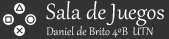
<style>
.page{position:relative;width:169px;height:39px;background:#333333}
.page>*{position:absolute;margin:0}
.t1{font:13.6px "Gabriola";color:#ffffff}
.t2{font:27.1px "Gabriola";color:#ffffff}
</style>
<div class="page">
<p class="t1" style="left:46px;top:1px;width:118px;height:37px"><span class="t2">Sala de Juegos<br></span>Daniel de Brito 4ºB  UTN</p>
</div>
